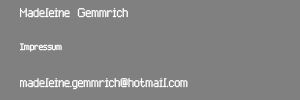
<style>
.page{position:relative;width:300px;height:100px;background:#808080}
.page>*{position:absolute;margin:0}
.t1{font:33.3px "Advanced_Pixel-7";color:#ffffff}
.t2{font:25px "Advanced_Pixel-7";color:#ffffff}
</style>
<div class="page">
<p class="t1" style="left:20px;top:8px;width:168px;height:82px">Madeleine Gemmrich<br><span class="t2">Impressum<br></span>madeleine.gemmrich@hotmail.com</p>
</div>
